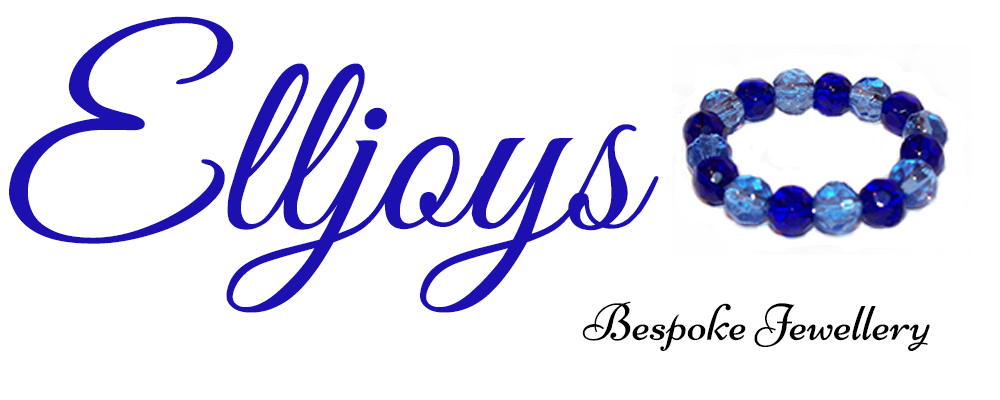
<style>
.page{position:relative;width:1000px;height:400px;background:#ffffff}
.page>*{position:absolute;margin:0}
.t1{font:264px "GreatVibes-Regular";color:#1c11b0}
.t2{font:52px "Niconne-Regular";color:#000000}
</style>
<div class="page">
<p class="t1" style="left:9px;top:16px;width:650px;height:297px">Elljoys</p>
<p class="t2" style="left:582px;top:301px;width:348px;height:50px">Bespoke Jewellery</p>
</div>
